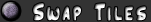
<style>
.page{position:relative;width:151px;height:22px;background:#333333}
.page>*{position:absolute;margin:0}
.t1{font:24px "Inkpen2Script";letter-spacing:0.1em;font-weight:bold}
</style>
<div class="page">
<p class="t1" style="left:33px;top:3px;width:113px;height:18px">Swap Tiles</p>
</div>
